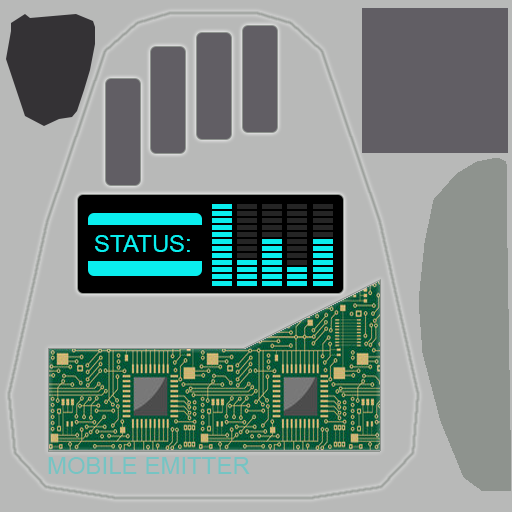
<style>
.page{position:relative;width:512px;height:512px;background:#b8b9b8}
.page>*{position:absolute;margin:0}
.t1{font:24px "ArialMT";color:#0aeeee}
.t2{font:24px "ArialMT";color:#76c4c3}
</style>
<div class="page">
<p class="t1" style="left:95px;top:235px;width:95px;height:17px">STATUS:</p>
<p class="t2" style="left:48px;top:457px;width:202px;height:17px">MOBILE EMITTER</p>
</div>
